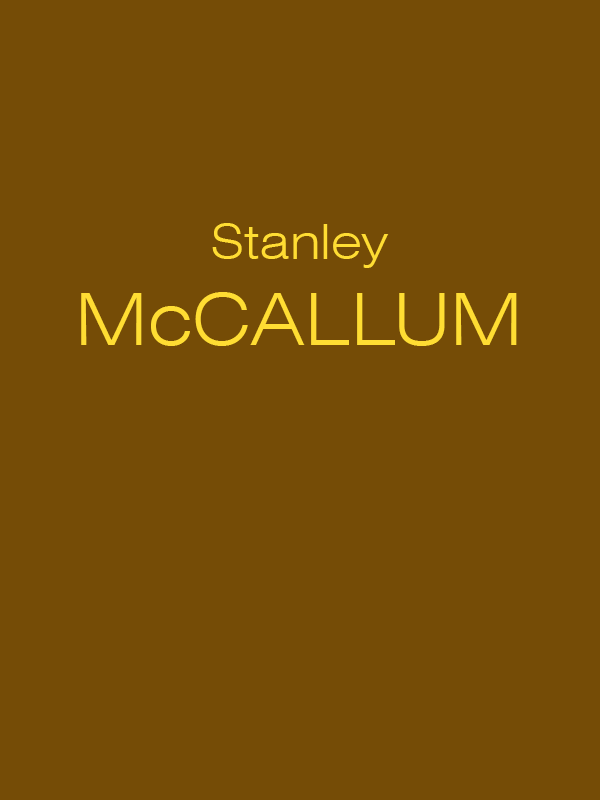
<style>
.page{position:relative;width:600px;height:800px;background:#754c06}
.page>*{position:absolute;margin:0}
.t1{font:72px "Swiss721BT-LightExtended";color:#ffdd33}
.t2{font:48px "Swiss721BT-LightExtended";color:#ffdd33}
</style>
<div class="page">
<p class="t1" style="left:81px;top:223px;width:436px;height:123px;text-align:center"><span class="t2">Stanley<br></span>McCALLUM</p>
</div>
